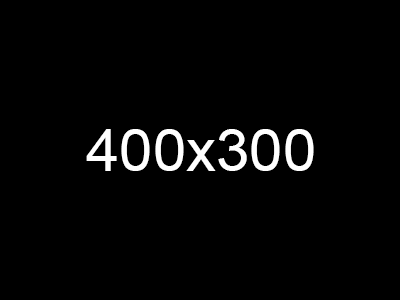
<style>
.page{position:relative;width:400px;height:300px;background:#000000}
.page>*{position:absolute;margin:0}
.t1{font:60px "ArialMT";color:#ffffff}
</style>
<div class="page">
<p class="t1" style="left:86px;top:129px;width:228px;height:42px">400x300</p>
</div>
